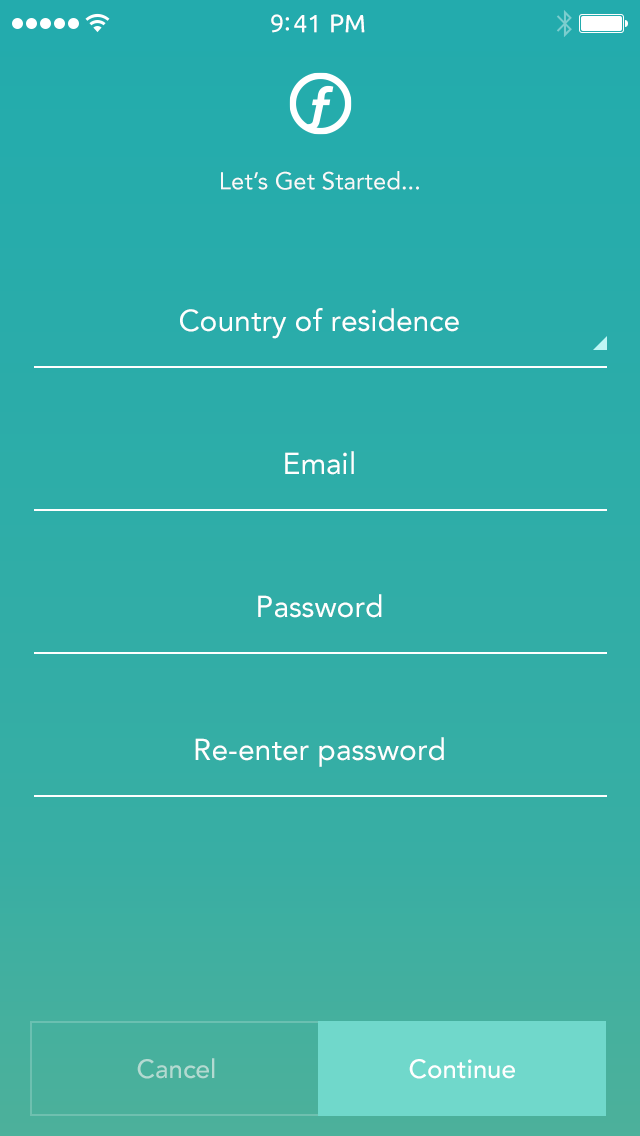
<style>
.page{position:relative;width:640px;height:1136px}
.page>*{position:absolute;margin:0}
.t1{font:25px "Ubuntu";color:#ffffff}
.t2{font:24px "Avenir-Roman";color:#f9f9f9}
.t3{font:30px "Avenir-Roman";color:#ffffff}
.t4{font:26px "Avenir-Medium";color:#b3dad1}
.t5{font:26px "Avenir-Medium";color:#ffffff}
</style>
<div class="page">
<p class="t1" style="left:271px;top:14px;width:94px;height:19px">9:41 PM</p>
<p class="t2" style="left:221px;top:171px;width:198px;height:19px">Let’s Get Started...</p>
<p class="t3" style="left:180px;top:308px;width:279px;height:31px">Country of residence</p>
<p class="t3" style="left:285px;top:451px;width:69px;height:24px">Email</p>
<p class="t3" style="left:258px;top:594px;width:124px;height:24px">Password</p>
<p class="t3" style="left:195px;top:737px;width:249px;height:30px">Re-enter password</p>
<p class="t4" style="left:137px;top:1058px;width:78px;height:21px">Cancel</p>
<p class="t5" style="left:409px;top:1059px;width:106px;height:20px">Continue</p>
</div>
